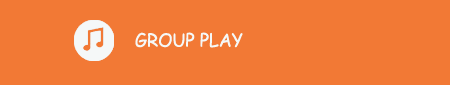
<style>
.page{position:relative;width:450px;height:85px;background:#f27935}
.page>*{position:absolute;margin:0}
.t1{font:18px "ComicSansMS";letter-spacing:-0.01em;color:#f5f8f8}
</style>
<div class="page">
<p class="t1" style="left:135px;top:32px;width:108px;height:16px">GROUP PLAY</p>
</div>
